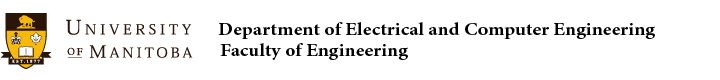
<style>
.page{position:relative;width:720px;height:80px;background:#ffffff}
.page>*{position:absolute;margin:0}
.t1{font:18px "MinionPro-Bold";color:#000000;scale:1.1 1}
</style>
<div class="page">
<p class="t1" style="left:218px;top:22px;width:437px;height:17px">Department of Electrical and Computer Engineering</p>
<p class="t1" style="left:220px;top:43px;width:188px;height:17px">Faculty of Engineering</p>
</div>
